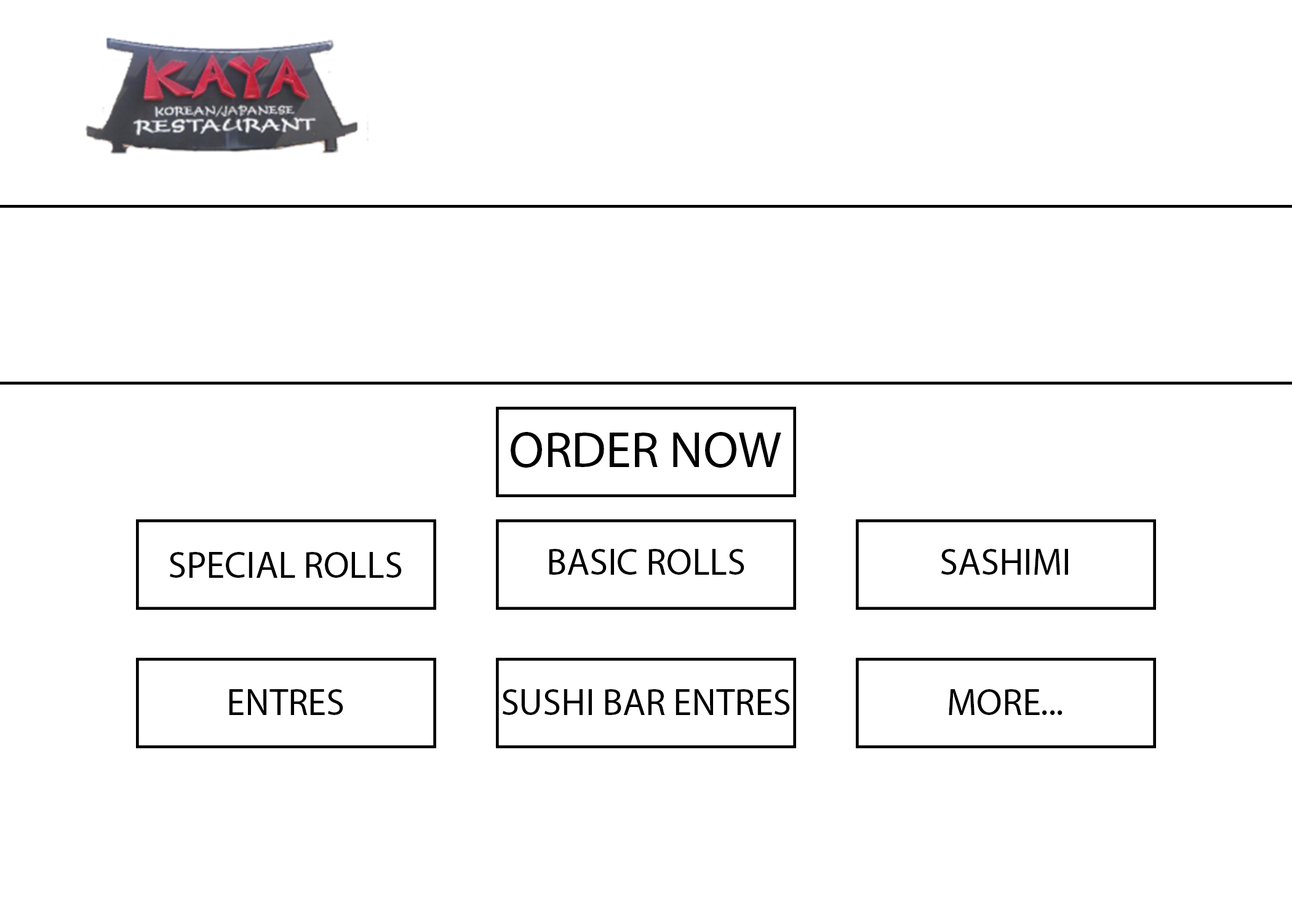
<style>
.page{position:relative;width:1292px;height:923px;background:#ffffff}
.page>*{position:absolute;margin:0}
.t1{font:12.3px "MyriadPro-Regular";color:#000000}
.t2{font:37.2px "MyriadPro-Regular";color:#000000}
</style>
<div class="page">
<p class="t1" style="left:511px;top:432px;width:270px;height:36px;text-align:center">ORDER NOW</p>
<p class="t2" style="left:170px;top:552px;width:232px;height:26px">SPECIAL ROLLS</p>
<p class="t2" style="left:549px;top:549px;width:195px;height:26px">BASIC ROLLS</p>
<p class="t2" style="left:941px;top:549px;width:127px;height:26px">SASHIMI</p>
<p class="t2" style="left:229px;top:689px;width:114px;height:26px">ENTRES</p>
<p class="t2" style="left:503px;top:689px;width:287px;height:26px">SUSHI BAR ENTRES</p>
<p class="t2" style="left:949px;top:689px;width:114px;height:26px">MORE...</p>
</div>
